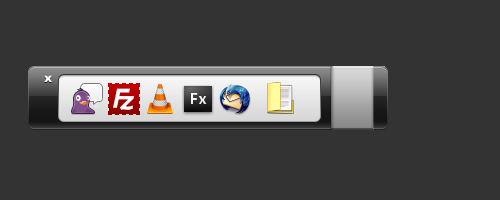
<style>
.page{position:relative;width:500px;height:200px;background:#333333}
.page>*{position:absolute;margin:0}
.t1{font:12px "Arial-Black";color:#ffffff}
</style>
<div class="page">
<p class="t1" style="left:44px;top:75px;width:8px;height:7px">x</p>
</div>
